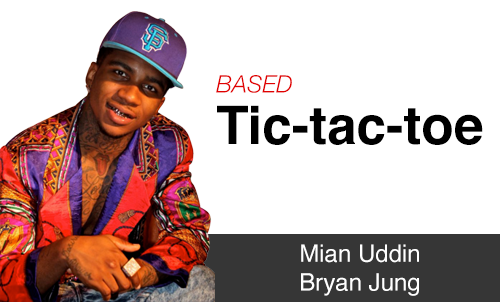
<style>
.page{position:relative;width:500px;height:302px;background:#ffffff}
.page>*{position:absolute;margin:0}
.t1{font:24px "HelveticaNeue-LightItalic";color:#e10101}
.t2{font:53px "Helvetica-Bold";color:#000000}
.t3{font:24px "Helvetica";color:#ffffff}
</style>
<div class="page">
<p class="t1" style="left:216px;top:75px;width:76px;height:18px">BASED</p>
<p class="t2" style="left:217px;top:105px;width:266px;height:40px">Tic-tac-toe</p>
<p class="t3" style="left:301px;top:244px;width:118px;height:52px">Mian Uddin<br>Bryan Jung</p>
</div>
